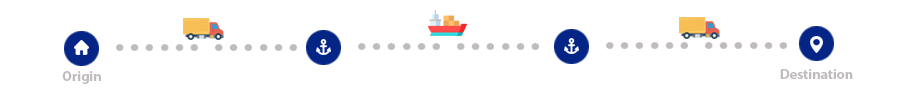
<style>
.page{position:relative;width:900px;height:100px;background:#ffffff}
.page>*{position:absolute;margin:0}
.t1{font:14px "MyriadPro-Bold";color:#c1bcbc}
</style>
<div class="page">
<p class="t1" style="left:62px;top:71px;width:39px;height:13px">Origin</p>
<p class="t1" style="left:780px;top:69px;width:73px;height:10px">Destination</p>
</div>
